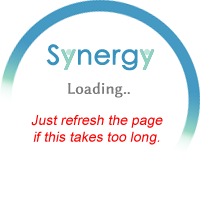
<style>
.page{position:relative;width:200px;height:200px;background:#ffffff}
.page>*{position:absolute;margin:0}
.t1{font:26.7px "CenturyGothic";letter-spacing:0.01em;color:#3792bd;font-weight:bold}
.t2{font:26.7px "CenturyGothic";letter-spacing:0.01em;color:#8fd2be;font-weight:bold}
.t3{font:16px "LinBiolinum";color:#7a7a7a;font-weight:bold}
.t4{font:14px "ArialMT";color:#fa0505;font-style:italic}
</style>
<div class="page">
<p class="t1" style="left:46px;top:44px;width:109px;height:27px">Synergy</p>
<p class="t2" style="left:61px;top:49px;width:15px;height:21px">y</p>
<p class="t2" style="left:139px;top:49px;width:15px;height:21px">y</p>
<p class="t3" style="left:68px;top:82px;width:55px;height:16px">Loading</p>
<p class="t3" style="left:68px;top:82px;width:59px;height:16px">Loading.</p>
<p class="t3" style="left:68px;top:82px;width:62px;height:16px">Loading..</p>
<p class="t3" style="left:68px;top:82px;width:67px;height:16px">Loading...</p>
<p class="t4" style="left:31px;top:115px;width:132px;height:30px;text-align:center">Just refresh the page if this takes too long.</p>
</div>
